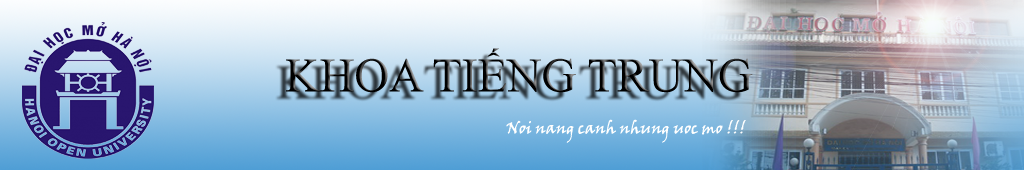
<style>
.page{position:relative;width:1024px;height:170px}
.page>*{position:absolute;margin:0}
.t1{font:48px "TimesNewRomanPSMT"}
.t2{font:16px "VinerHandITC";color:#ffffff}
</style>
<div class="page">
<p class="t1" style="left:286px;top:48px;width:467px;height:45px">KHOA TIẾNG TRUNG</p>
<p class="t2" style="left:506px;top:119px;width:240px;height:24px">Noi nang canh nhung uoc mo !!!</p>
</div>
